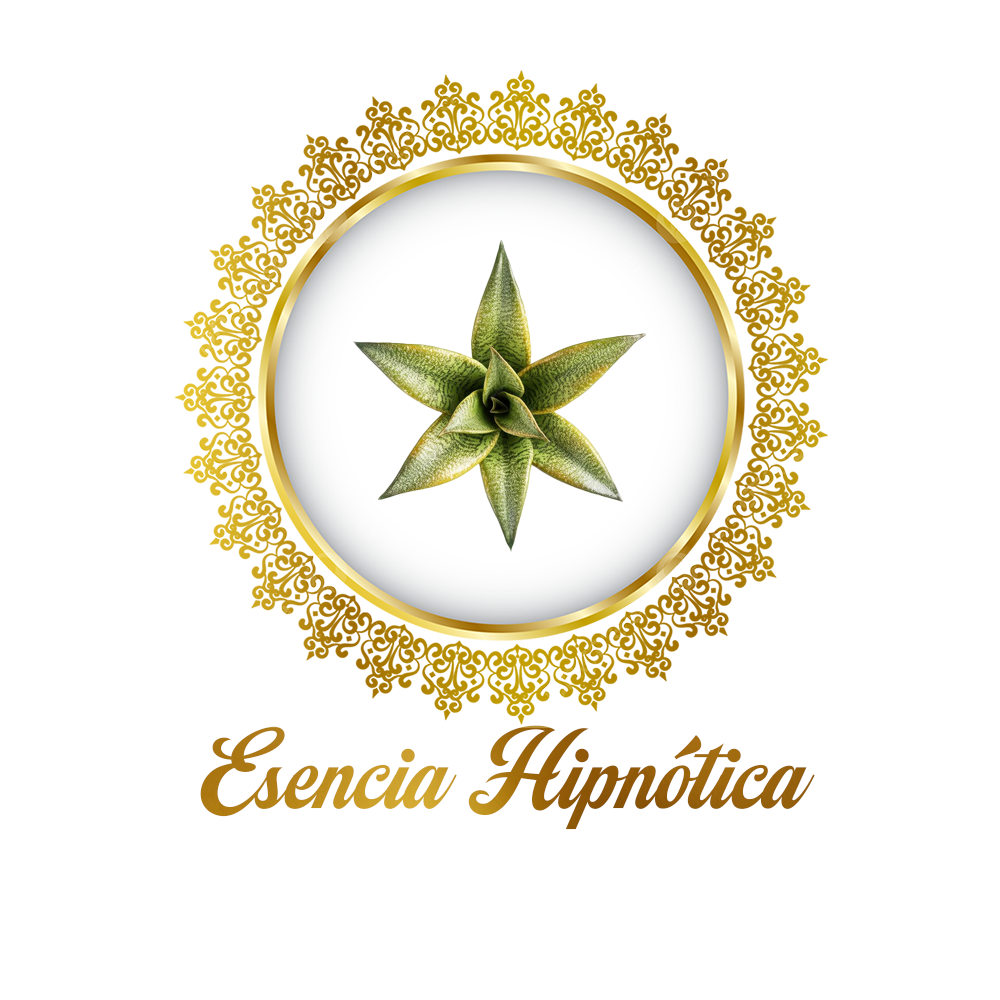
<style>
.page{position:relative;width:1000px;height:1000px;background:#ffffff}
.page>*{position:absolute;margin:0}
.t1{font:150px "CampanaScriptPERSONALUSE-Regular"}
</style>
<div class="page">
<p class="t1" style="left:200px;top:725px;width:615px;height:105px">Esencia Hipnótica</p>
</div>
